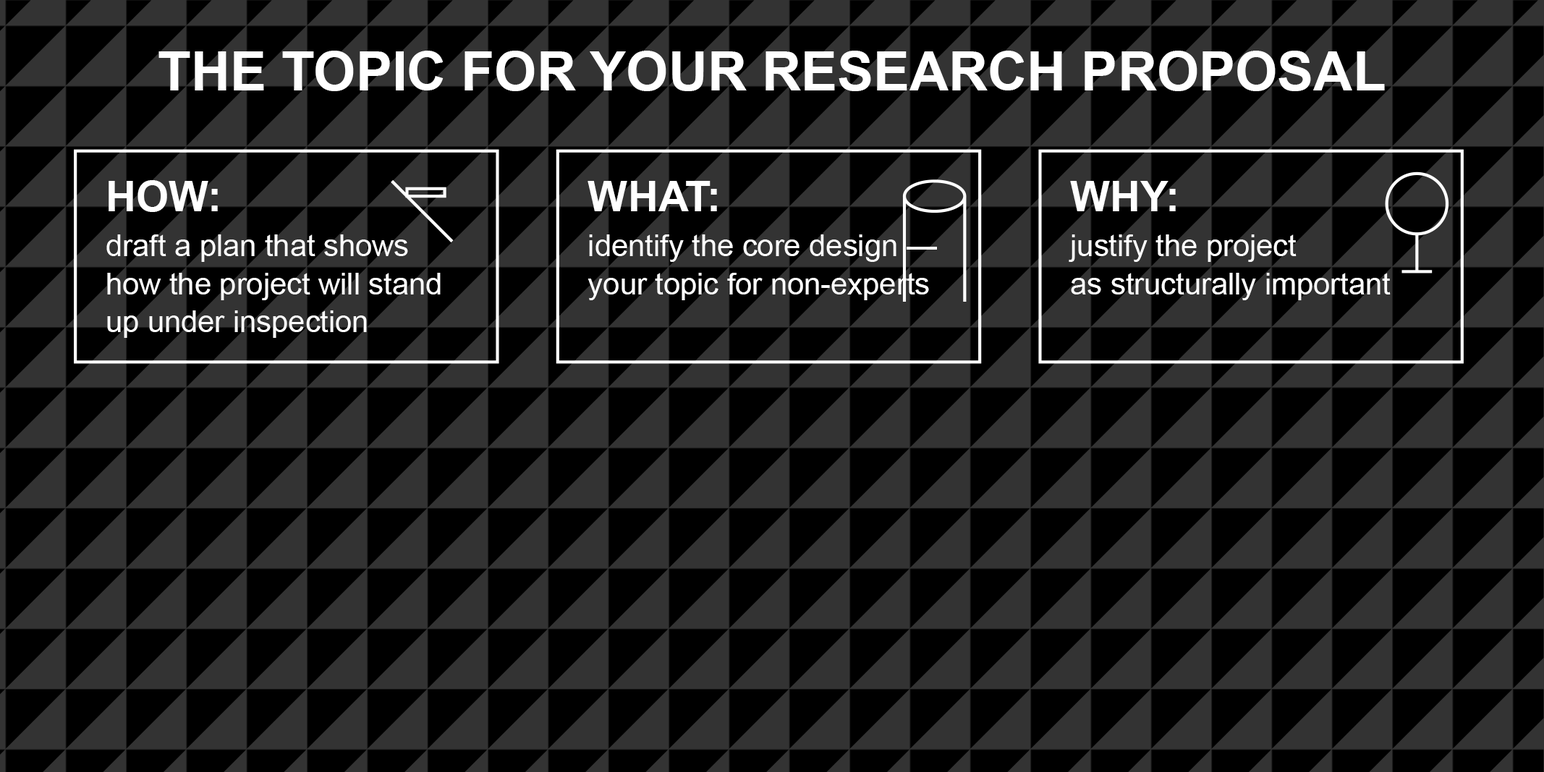
<style>
.page{position:relative;width:1544px;height:772px;background:#000000}
.page>*{position:absolute;margin:0}
.t1{font:54.3px "Arial-BoldMT";color:#ffffff}
.t2{font:42.2px "Arial-BoldMT";color:#ffffff}
.t3{font:30.2px "ArialMT";color:#ffffff}
</style>
<div class="page">
<p class="t1" style="left:158px;top:51px;width:1227px;height:40px">THE TOPIC FOR YOUR RESEARCH PROPOSAL</p>
<p class="t2" style="left:109px;top:180px;width:109px;height:32px">HOW:</p>
<p class="t2" style="left:588px;top:181px;width:129px;height:30px">WHAT:</p>
<p class="t2" style="left:1070px;top:181px;width:106px;height:30px">WHY:</p>
<p class="t3" style="left:106px;top:234px;width:302px;height:28px">draft a plan that shows</p>
<p class="t3" style="left:589px;top:234px;width:348px;height:28px">identify the core design —</p>
<p class="t3" style="left:1069px;top:234px;width:228px;height:28px">justify the project</p>
<p class="t3" style="left:107px;top:273px;width:334px;height:27px">how the project will stand</p>
<p class="t3" style="left:588px;top:273px;width:341px;height:27px">your topic for non-experts</p>
<p class="t3" style="left:1071px;top:273px;width:320px;height:27px">as structurally important</p>
<p class="t3" style="left:107px;top:310px;width:260px;height:28px">up under inspection</p>
</div>
